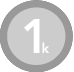
<style>
.page{position:relative;width:74px;height:72px;background:#cccccc}
.page>*{position:absolute;margin:0}
.t1{font:48px "Avenir-Heavy";color:#ffffff}
.t2{font:14px "Avenir-Heavy";color:#ffffff}
</style>
<div class="page">
<p class="t1" style="left:24px;top:19px;width:16px;height:34px">1</p>
<p class="t2" style="left:42px;top:42px;width:8px;height:11px">k</p>
</div>
